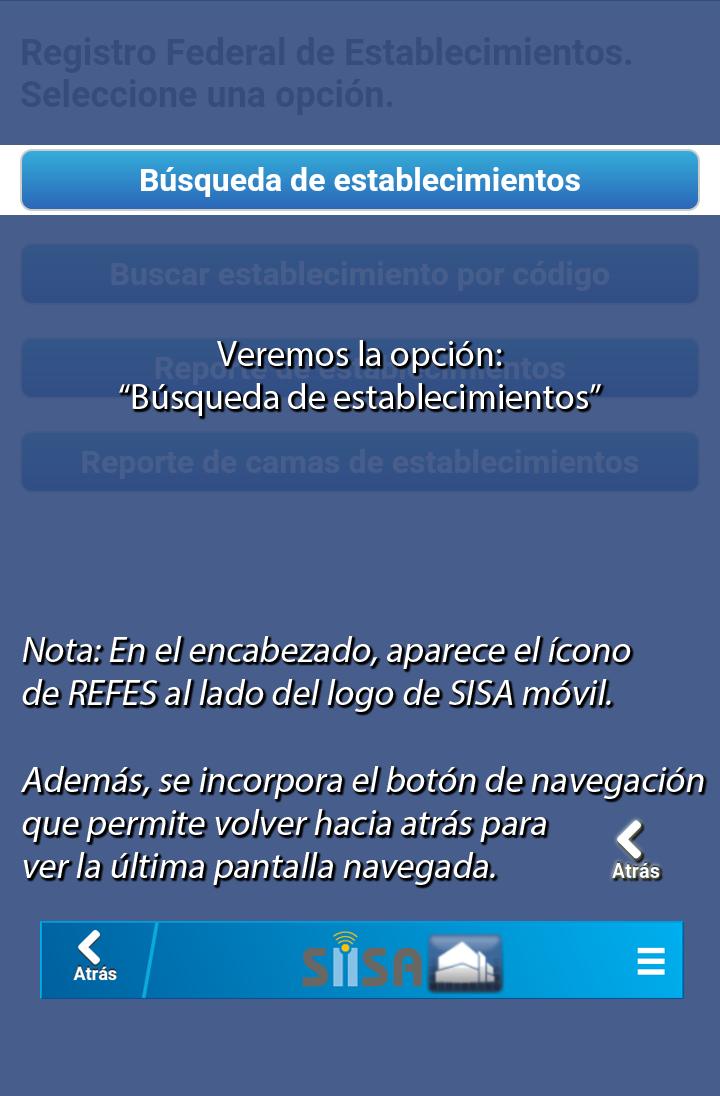
<style>
.page{position:relative;width:720px;height:1096px;background:#475e8c}
.page>*{position:absolute;margin:0}
.t1{font:36px "MyriadPro-Regular";color:#ffffff}
.t2{font:36px "MyriadPro-Regular";color:#ffffff;font-style:italic}
</style>
<div class="page">
<p class="t1" style="left:119px;top:340px;width:482px;height:76px;text-align:center">Veremos la opción:<br>“Búsqueda de establecimientos”</p>
<p class="t2" style="left:21px;top:636px;width:683px;height:249px">Nota: En el encabezado, aparece el ícono<br>de REFES al lado del logo de SISA móvil.<br><br>Además, se incorpora el botón de navegación<br>que permite volver hacia atrás para <br>ver la última pantalla navegada.</p>
</div>
